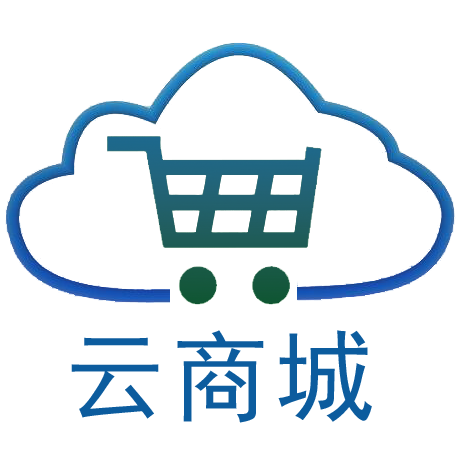
<style>
.page{position:relative;width:461px;height:461px;background:#ffffff}
.page>*{position:absolute;margin:0}
.t1{font:100px "SimHei";letter-spacing:0.05em;color:#0c5c9e}
</style>
<div class="page">
<p class="t1" style="left:71px;top:330px;width:301px;height:93px">云商城</p>
</div>
